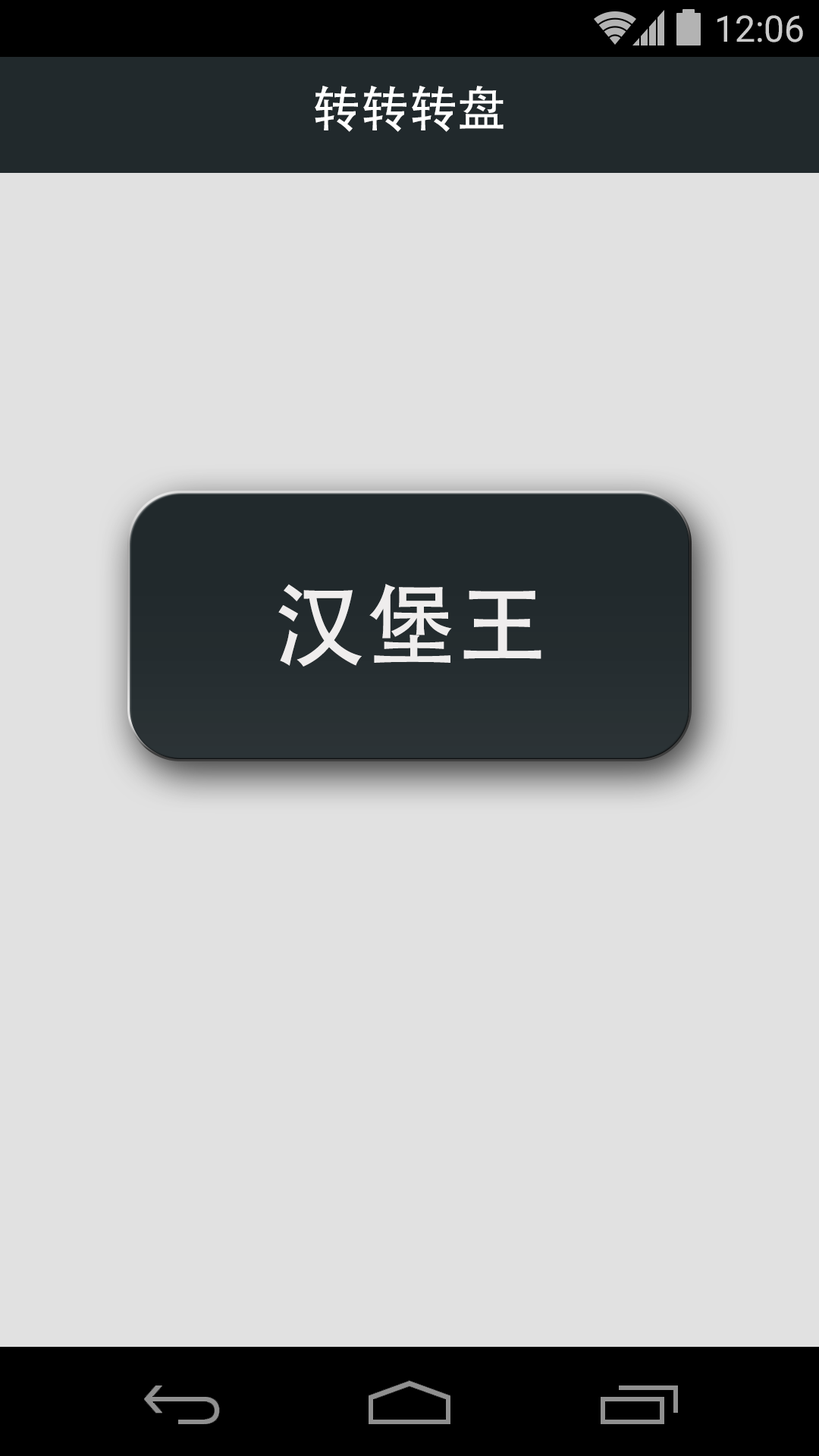
<style>
.page{position:relative;width:819px;height:1456px;background:#e1e1e1}
.page>*{position:absolute;margin:0}
.t1{font:36.4px "Roboto-Regular";color:#cbcbcb}
.t2{font:48.5px "AdobeHeitiStd-Regular";color:#ffffff}
.t3{font:91px "AdobeHeitiStd-Regular";color:#efeded}
</style>
<div class="page">
<p class="t1" style="left:717px;top:15px;width:86px;height:27px">12:06</p>
<p class="t2" style="left:315px;top:86px;width:189px;height:46px">转转转盘</p>
<p class="t3" style="left:278px;top:584px;width:263px;height:83px">汉堡王</p>
</div>
